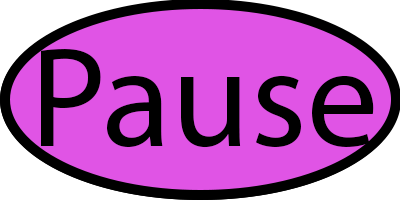
<style>
.page{position:relative;width:400px;height:200px;background:#e054e5}
.page>*{position:absolute;margin:0}
.t1{font:142.3px "MyriadPro-Regular";color:#000000}
</style>
<div class="page">
<p class="t1" style="left:41px;top:49px;width:333px;height:99px">Pause</p>
</div>
